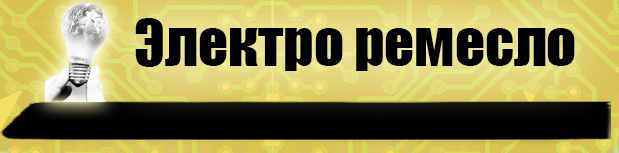
<style>
.page{position:relative;width:619px;height:153px;background:#000000}
.page>*{position:absolute;margin:0}
.t1{font:58.7px "Impact";color:#000000}
</style>
<div class="page">
<p class="t1" style="left:135px;top:18px;width:440px;height:53px">Электро ремесло</p>
</div>
